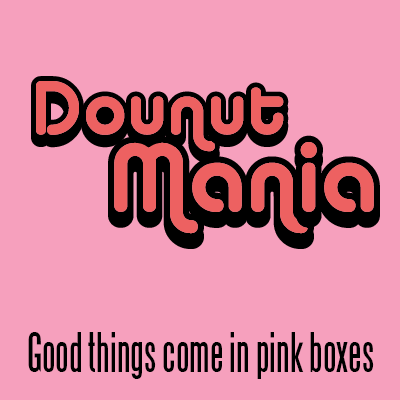
<style>
.page{position:relative;width:400px;height:400px;background:#f6a0bd}
.page>*{position:absolute;margin:0}
.t1{font:50px "Steelfish";color:#000000}
</style>
<div class="page">
<p class="t1" style="left:28px;top:332px;width:346px;height:47px">Good things come in pink boxes</p>
</div>
